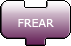
<style>
.page{position:relative;width:71px;height:46px;background:#ffffff}
.page>*{position:absolute;margin:0}
.t1{font:11px "Verdana";color:#ffffff}
</style>
<div class="page">
<p class="t1" style="left:18px;top:19px;width:36px;height:8px">FREAR</p>
</div>
